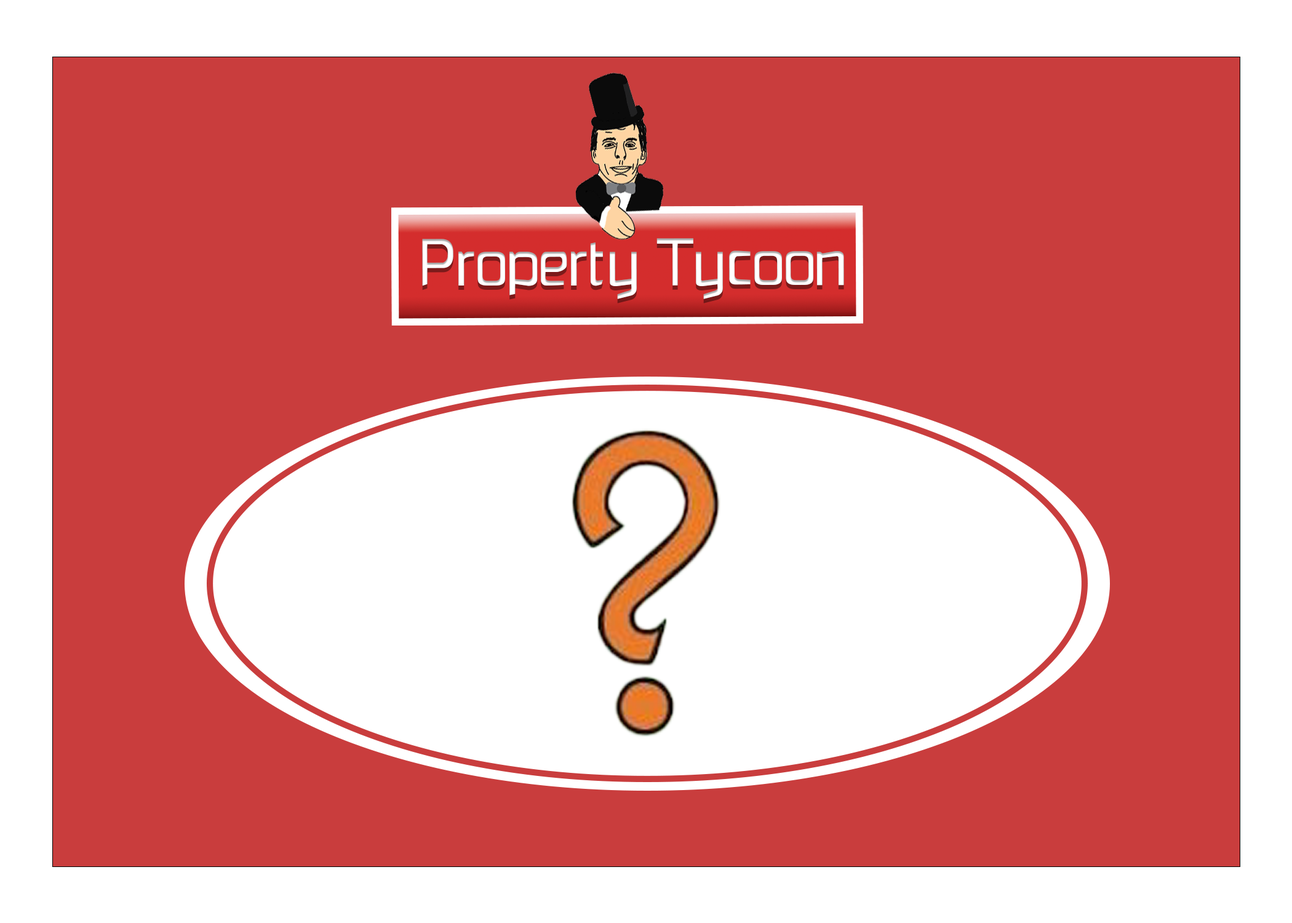
<style>
.page{position:relative;width:1292px;height:923px;background:#c93d3d}
.page>*{position:absolute;margin:0}
.t1{font:67.2px "Monopoly";color:#ffffff}
</style>
<div class="page">
<p class="t1" style="left:422px;top:238px;width:422px;height:61px">Property Tycoon</p>
</div>
